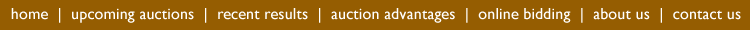
<style>
.page{position:relative;width:750px;height:30px;background:#955d01}
.page>*{position:absolute;margin:0}
.t1{font:16px "GillSansMT";letter-spacing:0.01em;color:#ffffff}
</style>
<div class="page">
<p class="t1" style="left:11px;top:8px;width:730px;height:15px">home  |  upcoming auctions  |  recent results  |  auction advantages  |  online bidding  |  about us  |  contact us</p>
</div>
